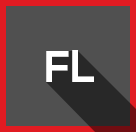
<style>
.page{position:relative;width:136px;height:132px;background:#505050}
.page>*{position:absolute;margin:0}
.t1{font:44.4px "NexaBold";color:#ffffff}
</style>
<div class="page">
<p class="t1" style="left:46px;top:50px;width:48px;height:32px">FL</p>
</div>
